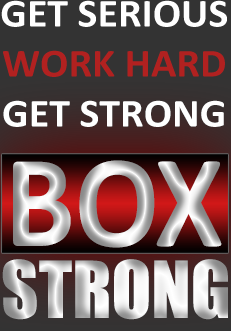
<style>
.page{position:relative;width:231px;height:331px}
.page>*{position:absolute;margin:0}
.t1{font:40px/50px "Calibri-Bold";color:#ffffff;text-transform:uppercase;scale:1.05 1}
.t2{font:40px/50px "Calibri-Bold";color:#b12120;text-transform:uppercase;scale:1.05 1}
.t3{font:132.8px "Calibri-Bold";text-transform:uppercase;scale:0.94 1}
.t4{font:72.7px "Impact";text-transform:uppercase}
</style>
<div class="page">
<p class="t1" style="left:1px;top:0px;width:226px;height:127px;text-align:center">GET SERIOUS<br><span class="t2">work hard<br></span>GET strong</p>
<p class="t3" style="left:13px;top:160px;width:209px;height:88px">box</p>
<p class="t4" style="left:2px;top:259px;width:226px;height:61px">strong</p>
</div>
